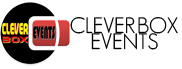
<style>
.page{position:relative;width:182px;height:69px;background:#ffffff}
.page>*{position:absolute;margin:0}
.t1{font:21.7px "GeosansLight";color:#000000}
</style>
<div class="page">
<p class="t1" style="left:70px;top:17px;width:65px;height:17px">CLEVER</p>
<p class="t1" style="left:138px;top:17px;width:40px;height:17px">BOX</p>
<p class="t1" style="left:91px;top:33px;width:67px;height:17px">EVENTS</p>
</div>
